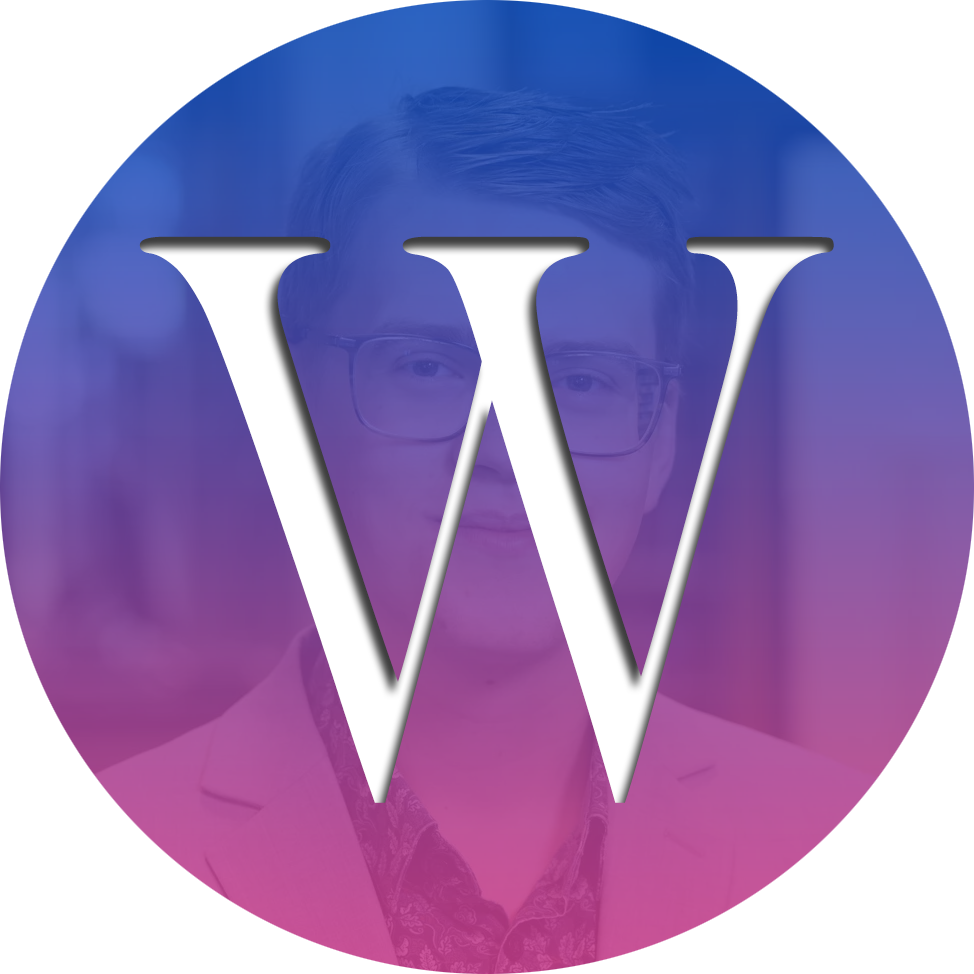
<style>
.page{position:relative;width:974px;height:974px;background:#ffffff}
.page>*{position:absolute;margin:0}
.t1{font:880px "BellMT";color:#ffffff;scale:0.77 1}
</style>
<div class="page">
<p class="t1" style="left:139px;top:236px;width:695px;height:567px">W</p>
</div>
